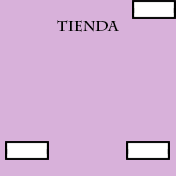
<style>
.page{position:relative;width:176px;height:176px;background:#d8b1da}
.page>*{position:absolute;margin:0}
.t1{font:13.7px "CharlemagneStd-Bold";color:#000000}
</style>
<div class="page">
<p class="t1" style="left:57px;top:20px;width:62px;height:12px">Tienda</p>
</div>
